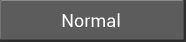
<style>
.page{position:relative;width:186px;height:42px;background:#5c5c5c}
.page>*{position:absolute;margin:0}
.t1{font:18px "Roboto-Regular";color:#ffffff}
</style>
<div class="page">
<p class="t1" style="left:62px;top:13px;width:58px;height:15px">Normal</p>
</div>
